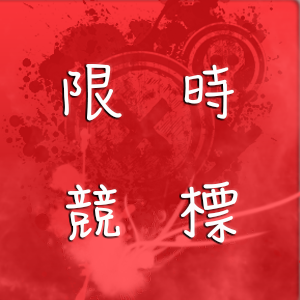
<style>
.page{position:relative;width:300px;height:300px}
.page>*{position:absolute;margin:0}
.t1{font:105px "DFYun-W3-WINP-BF";letter-spacing:0.1em;color:#fdfdfd}
</style>
<div class="page">
<p class="t1" style="left:63px;top:64px;width:175px;height:179px">限時<br>競標</p>
</div>
